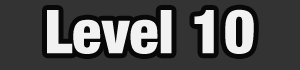
<style>
.page{position:relative;width:300px;height:70px;background:#333333}
.page>*{position:absolute;margin:0}
.t1{font:60px "Harvest";color:#f2f2f2}
</style>
<div class="page">
<p class="t1" style="left:47px;top:9px;width:207px;height:45px">Level 10</p>
</div>
